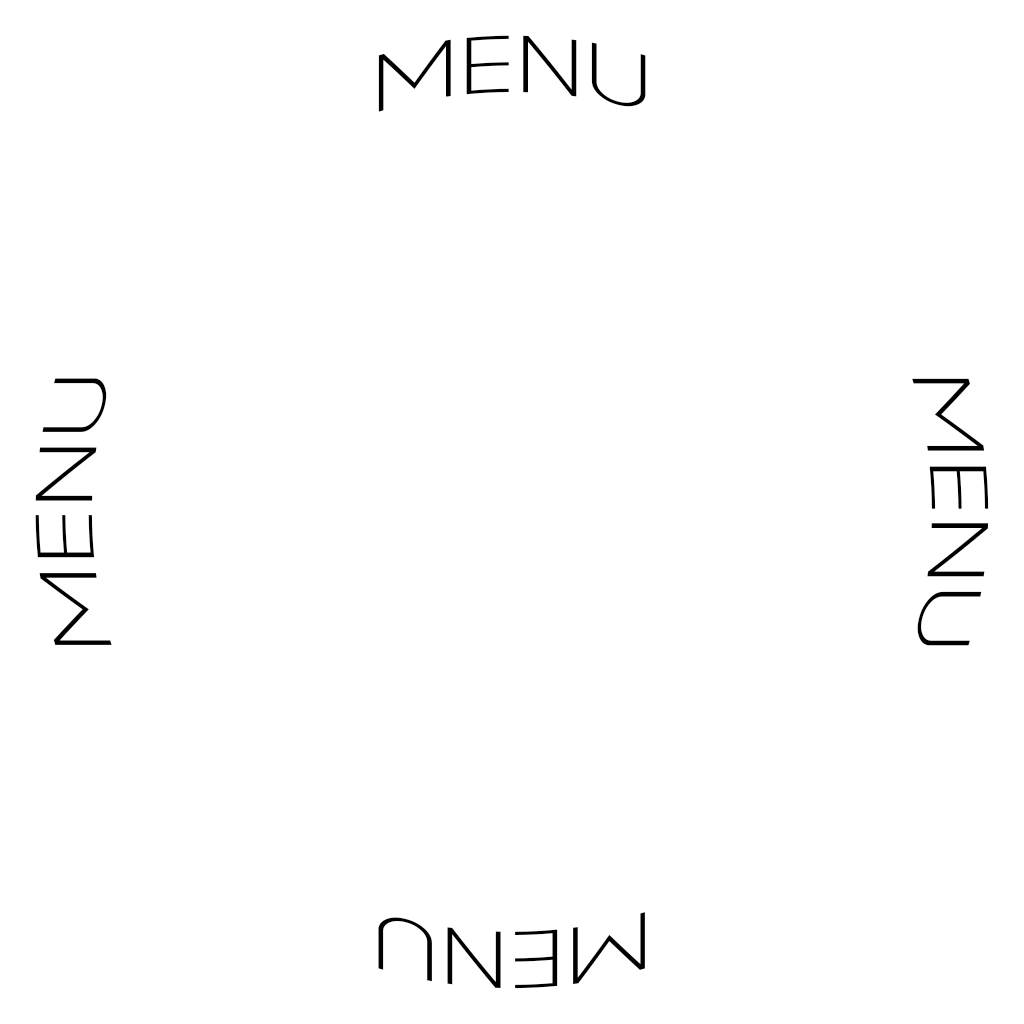
<style>
.page{position:relative;width:1024px;height:1024px;background:#ffffff}
.page>*{position:absolute;margin:0}
.t1{font:72px "CaviarDreams";color:#000000}
</style>
<div class="page">
<p class="t1" style="left:378px;top:35px;width:268px;height:77px">MENU</p>
<p class="t1" style="left:35px;top:378px;width:77px;height:268px;rotate:-90deg">MENU</p>
<p class="t1" style="left:912px;top:378px;width:77px;height:268px;rotate:90deg">MENU</p>
<p class="t1" style="left:378px;top:912px;width:268px;height:77px;rotate:180deg">MENU</p>
</div>
